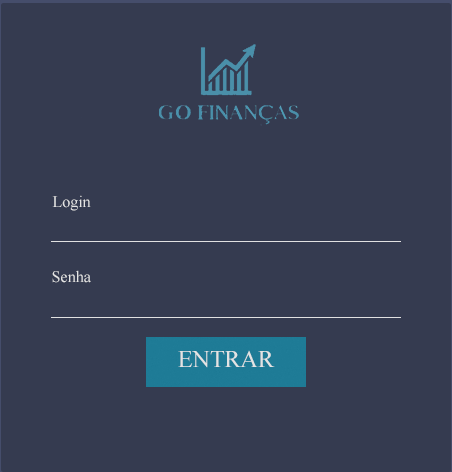
<style>
.page{position:relative;width:452px;height:472px;background:#353b50}
.page>*{position:absolute;margin:0}
.t1{font:16px "TimesNewRomanPSMT";color:#e4e4e4}
.t2{font:24px "TimesNewRomanPSMT";color:#e4e4e4}
</style>
<div class="page">
<p class="t1" style="left:52px;top:195px;width:39px;height:16px">Login</p>
<p class="t1" style="left:52px;top:270px;width:39px;height:13px">Senha</p>
<p class="t2" style="left:178px;top:350px;width:97px;height:18px">ENTRAR</p>
</div>
